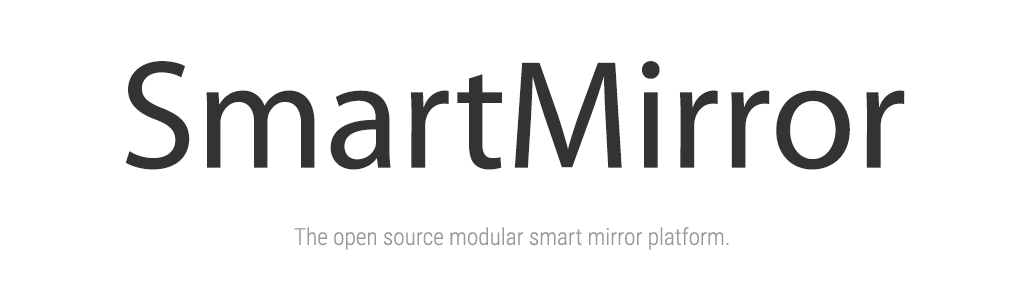
<style>
.page{position:relative;width:1024px;height:300px;background:#ffffff}
.page>*{position:absolute;margin:0}
.t1{font:155.3px "Myriad-Roman";color:#333333}
.t2{font:39.9px "RobotoCondensed-Light";color:#999999}
</style>
<div class="page">
<p class="t1" style="left:125px;top:61px;width:780px;height:109px">SmartMirror</p>
<p class="t2" style="left:294px;top:227px;width:435px;height:23px">The open source modular smart mirror platform.</p>
</div>
